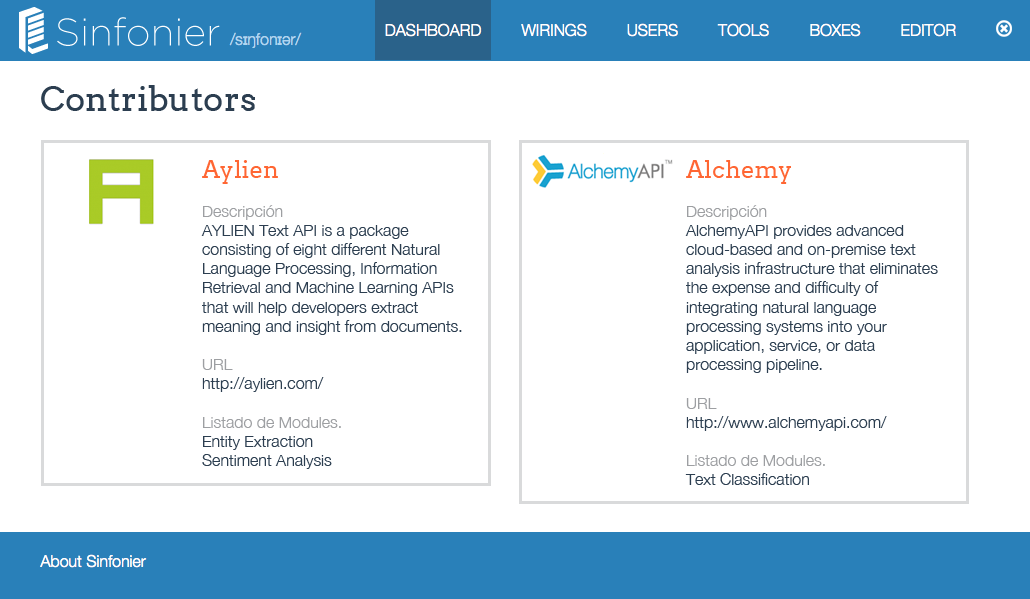
<style>
.page{position:relative;width:1030px;height:599px;background:#ffffff}
.page>*{position:absolute;margin:0}
.t1{font:34px "Arvo";color:#2c3e50}
.t2{font:16px "HelveticaNeue-Light";color:#2c3e50}
.t3{font:24px "Arvo";color:#ff6633}
.t4{font:16px "HelveticaNeue-Light";color:#9d9fa2}
</style>
<div class="page">
<p class="t1" style="left:41px;top:85px;width:214px;height:26px">Contributors</p>
<p class="t2" style="left:201px;top:160px;width:261px;height:309px"><span class="t3">Aylien<br><br></span><span class="t4">Descripción <br></span>AYLIEN Text API is a package consisting of eight different Natural Language Processing, Information Retrieval and Machine Learning APIs that will help developers extract meaning and insight from documents.<br><br><span class="t4">URL<br></span>http://aylien.com/<br><br><span class="t4">Listado de Modules. <br></span>Entity Extraction<br>Sentiment Analysis<br>Language Detection</p>
<p class="t2" style="left:685px;top:160px;width:253px;height:325px"><span class="t3">Alchemy<br><br></span><span class="t4">Descripción <br></span>AlchemyAPI provides advanced cloud-based and on-premise text analysis infrastructure that eliminates the expense and difficulty of integrating natural language processing systems into your application, service, or data processing pipeline.<br><br><span class="t4">URL<br></span>http://www.alchemyapi.com/<br><br><span class="t4">Listado de Modules. <br></span>Text Classification</p>
</div>
